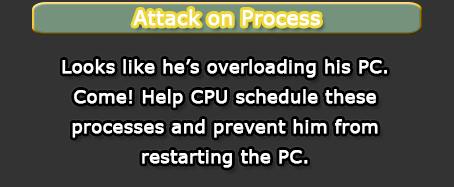
<style>
.page{position:relative;width:454px;height:187px;background:#333333}
.page>*{position:absolute;margin:0}
.t1{font:20px "Verdana";color:#ffffff;font-weight:bold}
.t2{font:18px/30px "Verdana";color:#ffffff;font-weight:bold}
</style>
<div class="page">
<p class="t1" style="left:133px;top:9px;width:187px;height:17px">Attack on Process</p>
<p class="t2" style="left:62px;top:59px;width:325px;height:109px;text-align:center">Looks like he’s overloading his PC.<br>Come! Help CPU schedule these processes and prevent him from restarting the PC.</p>
</div>
